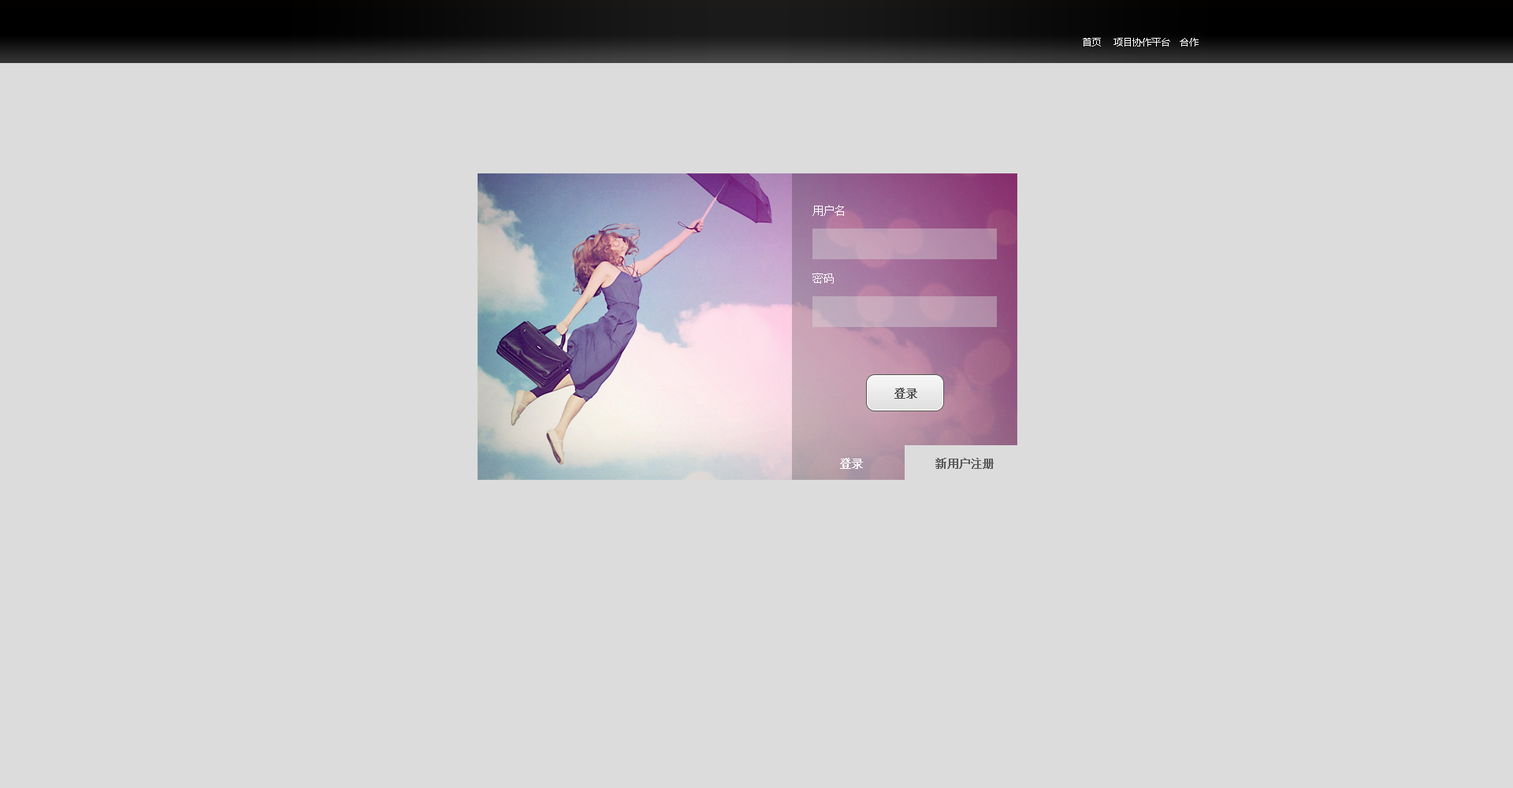
<style>
.page{position:relative;width:1513px;height:788px;background:#dcdcdc}
.page>*{position:absolute;margin:0}
.t1{font:9.5px "MicrosoftYaHei";color:#ffffff}
.t2{font:11px "SimSun";color:#ffffff}
.t3{font:11px "SimSun";color:#505050;font-weight:bold}
.t4{font:11px "SimSun";color:#ffffff;font-weight:bold}
.t5{font:11px "SimSun";color:#5b5b5b;font-weight:bold}
</style>
<div class="page">
<p class="t1" style="left:1083px;top:38px;width:116px;height:8px">首页    项目协作平台   合作</p>
<p class="t2" style="left:813px;top:205px;width:31px;height:11px">用户名</p>
<p class="t2" style="left:813px;top:273px;width:21px;height:11px">密码</p>
<p class="t3" style="left:894px;top:388px;width:23px;height:11px">登录</p>
<p class="t4" style="left:840px;top:458px;width:23px;height:11px">登录</p>
<p class="t5" style="left:935px;top:458px;width:59px;height:11px">新用户注册</p>
</div>
